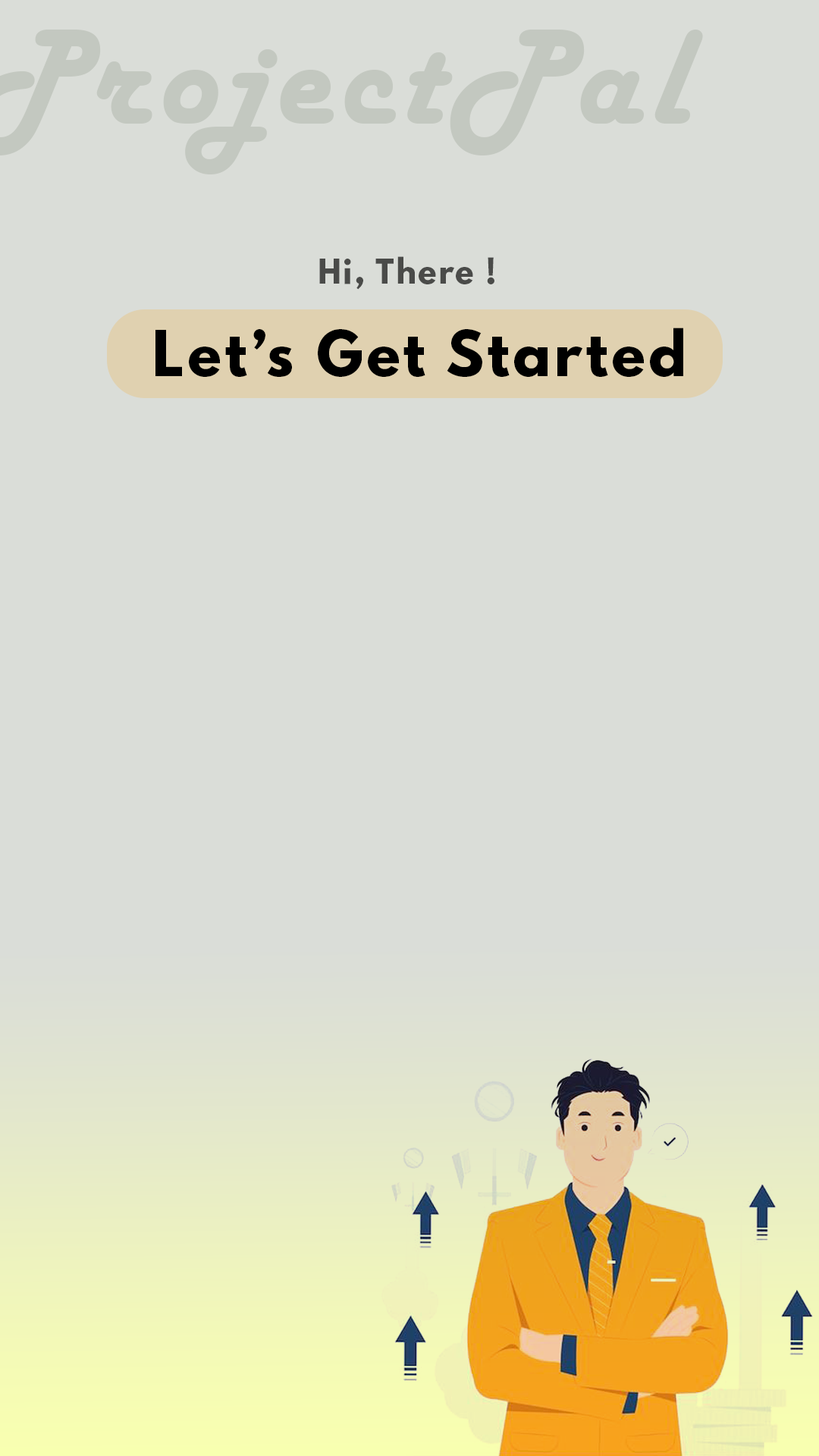
<style>
.page{position:relative;width:819px;height:1456px;background:#daddd8}
.page>*{position:absolute;margin:0}
.t1{font:30.7px "LeagueSpartan-Bold";letter-spacing:0.06em;color:#4a4b49}
.t2{font:56.1px "LeagueSpartan-Bold";letter-spacing:0.06em;color:#000000}
</style>
<div class="page">
<p class="t1" style="left:319px;top:256px;width:175px;height:34px">Hi, There !</p>
<p class="t2" style="left:155px;top:328px;width:528px;height:49px">Let’s Get Started</p>
</div>
